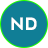
<style>
.page{position:relative;width:48px;height:48px;background:#107e96}
.page>*{position:absolute;margin:0}
.t1{font:17px "nevis-Bold";letter-spacing:0.05em;color:#ffffff}
</style>
<div class="page">
<p class="t1" style="left:11px;top:17px;width:26px;height:13px">ND</p>
</div>
